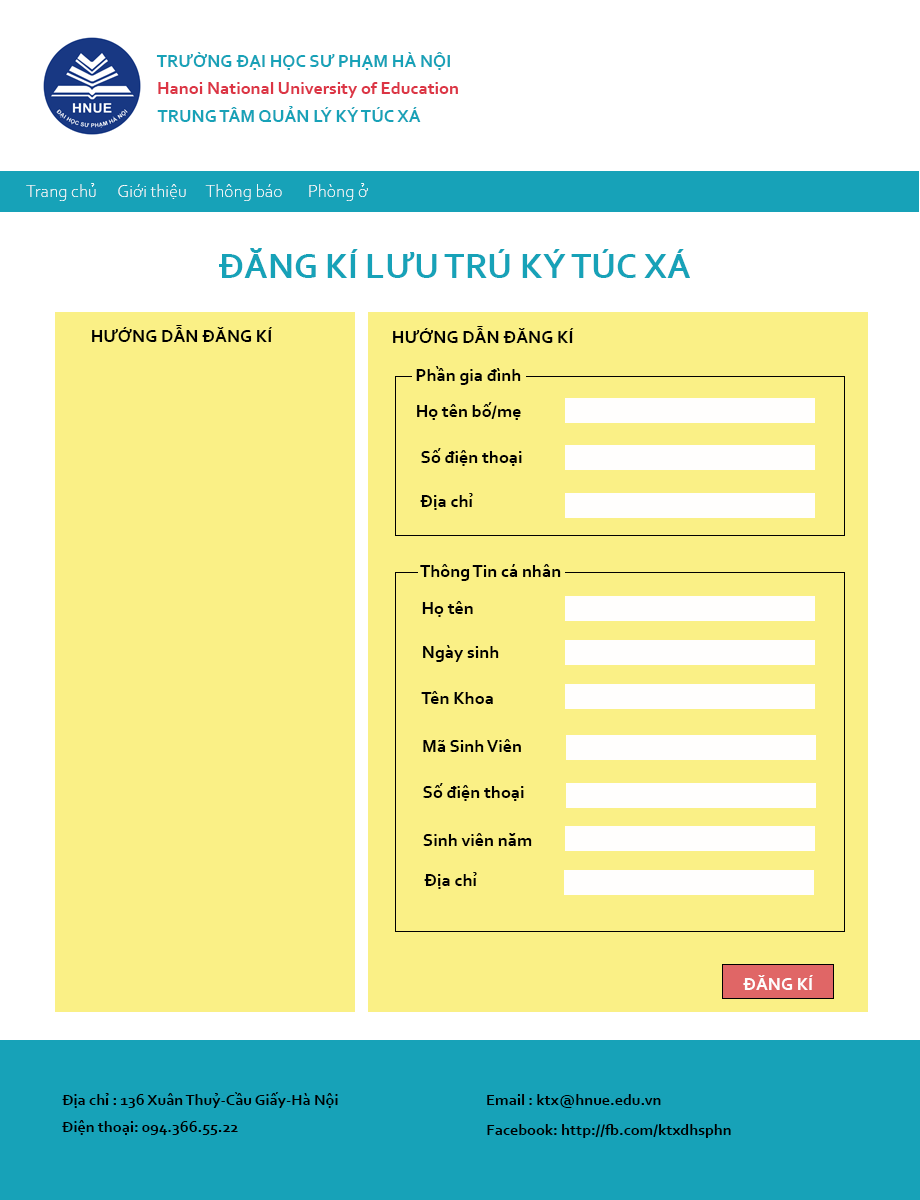
<style>
.page{position:relative;width:920px;height:1200px;background:#faf086}
.page>*{position:absolute;margin:0}
.t1{font:18px "Corbel-Bold";color:#17a2b8}
.t2{font:18px "Corbel-Bold";color:#dc3545}
.t3{font:18px "CorbelLight";color:#ffffff}
.t4{font:36px "Corbel-Bold";color:#17a2b8}
.t5{font:18px "Corbel-Bold";color:#000000}
.t6{font:18px "Corbel-Bold";color:#fefefd}
.t7{font:16px "Corbel-Bold";color:#000000}
</style>
<div class="page">
<p class="t1" style="left:156px;top:52px;width:294px;height:18px">TRƯỜNG ĐẠI HỌC SƯ PHẠM HÀ NỘI</p>
<p class="t2" style="left:158px;top:82px;width:300px;height:16px">Hanoi National University of Education</p>
<p class="t1" style="left:157px;top:106px;width:264px;height:16px">TRUNG TÂM QUẢN LÝ KÝ TÚC XÁ</p>
<p class="t3" style="left:26px;top:183px;width:70px;height:18px">Trang chủ</p>
<p class="t3" style="left:118px;top:184px;width:68px;height:15px">Giới thiệu</p>
<p class="t3" style="left:205px;top:184px;width:77px;height:17px">Thông báo</p>
<p class="t3" style="left:309px;top:183px;width:59px;height:18px">Phòng ở</p>
<p class="t4" style="left:219px;top:248px;width:471px;height:30px">ĐĂNG KÍ LƯU TRÚ KÝ TÚC XÁ</p>
<p class="t5" style="left:92px;top:325px;width:180px;height:17px">HƯỚNG DẪN ĐĂNG KÍ</p>
<p class="t5" style="left:393px;top:326px;width:181px;height:17px">HƯỚNG DẪN ĐĂNG KÍ</p>
<p class="t5" style="left:416px;top:366px;width:105px;height:19px">Phần gia đình</p>
<p class="t5" style="left:417px;top:402px;width:104px;height:18px">Họ tên bố/mẹ</p>
<p class="t5" style="left:421px;top:448px;width:101px;height:18px">Số điện thoại</p>
<p class="t5" style="left:420px;top:493px;width:53px;height:17px">Địa chỉ</p>
<p class="t5" style="left:420px;top:564px;width:141px;height:17px">Thông Tin cá nhân</p>
<p class="t5" style="left:422px;top:601px;width:51px;height:16px">Họ tên</p>
<p class="t5" style="left:423px;top:645px;width:76px;height:17px">Ngày sinh</p>
<p class="t5" style="left:421px;top:691px;width:72px;height:13px">Tên Khoa</p>
<p class="t5" style="left:423px;top:739px;width:98px;height:13px">Mã Sinh Viên</p>
<p class="t5" style="left:423px;top:783px;width:101px;height:18px">Số điện thoại</p>
<p class="t5" style="left:423px;top:833px;width:109px;height:13px">Sinh viên năm</p>
<p class="t5" style="left:424px;top:872px;width:53px;height:17px">Địa chỉ</p>
<p class="t6" style="left:743px;top:975px;width:70px;height:15px">ĐĂNG KÍ</p>
<p class="t7" style="left:62px;top:1092px;width:276px;height:16px">Địa chỉ : 136 Xuân Thuỷ-Cầu Giấy-Hà Nội</p>
<p class="t7" style="left:487px;top:1094px;width:174px;height:14px">Email : ktx@hnue.edu.vn</p>
<p class="t7" style="left:62px;top:1120px;width:176px;height:15px">Điện thoại: 094.366.55.22</p>
<p class="t7" style="left:487px;top:1124px;width:244px;height:14px">Facebook: http://fb.com/ktxdhsphn</p>
</div>
